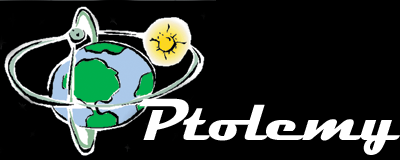
<style>
.page{position:relative;width:400px;height:160px;background:#000000}
.page>*{position:absolute;margin:0}
.t1{font:60px "Magneto-Bold";color:#ffffff}
</style>
<div class="page">
<p class="t1" style="left:139px;top:98px;width:261px;height:57px">Ptolemy</p>
</div>
